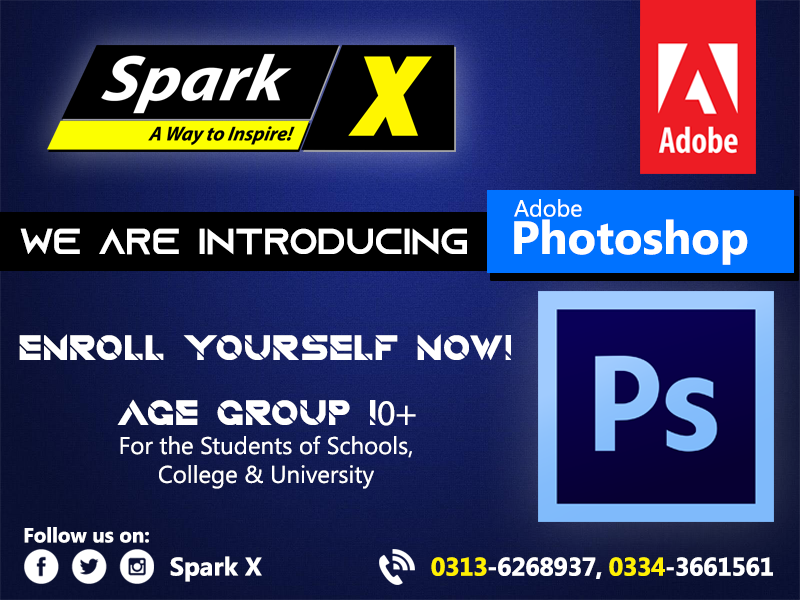
<style>
.page{position:relative;width:800px;height:600px}
.page>*{position:absolute;margin:0}
.t1{font:23.3px "SegoeUI";color:#ffffff}
.t2{font:46.6px "SegoeUI-Bold";color:#ffffff}
.t3{font:36px "AzonixRegular";color:#ffffff}
.t4{font:36px "QuantumRegular";color:#ffffff}
.t5{font:36px "MyriadPro-Regular";color:#ffffff}
.t6{font:24px "SegoeUI";color:#ffffff}
.t7{font:20.4px "SegoeUI-Bold";color:#ffffff}
.t8{font:25.5px "SegoeUI-Bold";color:#ffffff}
.t9{font:25.5px "SegoeUI-Bold";letter-spacing:-0.02em;color:#ffffff}
.t10{font:25.5px "SegoeUI-Bold";letter-spacing:-0.02em;color:#fff000}
</style>
<div class="page">
<p class="t1" style="left:514px;top:199px;width:68px;height:18px">Adobe</p>
<p class="t2" style="left:514px;top:219px;width:234px;height:46px">Photoshop</p>
<p class="t3" style="left:20px;top:228px;width:447px;height:27px">WE ARE INTRODUCING</p>
<p class="t4" style="left:19px;top:334px;width:492px;height:26px">ENROLL YOURSELF NOW!</p>
<p class="t4" style="left:117px;top:399px;width:299px;height:27px">AGE GROUP !<span class="t5">0+</span></p>
<p class="t6" style="left:120px;top:435px;width:292px;height:54px;text-align:center">For the Students of Schools,<br>College &amp; University</p>
<p class="t7" style="left:24px;top:527px;width:125px;height:16px">Follow us on:</p>
<p class="t8" style="left:170px;top:556px;width:92px;height:26px">Spark X</p>
<p class="t9" style="left:431px;top:557px;width:342px;height:22px"><span class="t10">0313</span>-6268937, <span class="t10">0334</span>-3661561</p>
</div>
